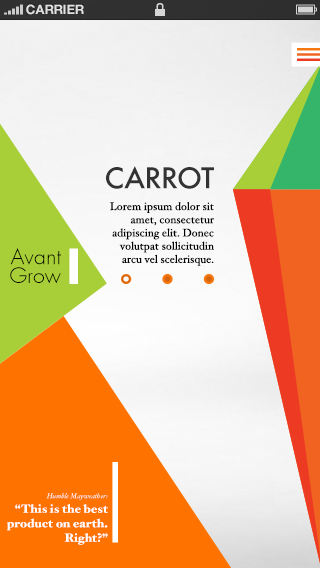
<style>
.page{position:relative;width:320px;height:568px}
.page>*{position:absolute;margin:0}
.t1{font:13px "HelveticaNeue-Bold";color:#e0e0e0;text-transform:uppercase}
.t2{font:27.7px "Futura-Medium";letter-spacing:-0.012em;color:#333333}
.t3{font:11px "HoeflerText-Regular";color:#000000}
.t4{font:21px/18.7px "FuturaLight";color:#000000}
.t5{font:7.2px "HoeflerText-Italic"}
.t6{font:12.1px "HoeflerText-Black";color:#fffffe}
</style>
<div class="page">
<p class="t1" style="left:26px;top:4px;width:58px;height:11px">CARRIER</p>
<p class="t2" style="left:106px;top:166px;width:108px;height:23px">CARROT</p>
<p class="t3" style="left:110px;top:202px;width:104px;height:64px;text-align:right">Lorem ipsum dolor sit amet, consectetur adipiscing elit. Donec volutpat sollicitudin arcu vel scelerisque.</p>
<p class="t4" style="left:10px;top:248px;width:51px;height:36px;text-align:right">Avant<br>Grow</p>
<p class="t5" style="left:46px;top:493px;width:62px;height:8px">Humble Mayweather:</p>
<p class="t6" style="left:6px;top:504px;width:102px;height:41px;text-align:right">“This is the best product on earth. Right?”</p>
</div>
